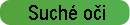
<style>
.page{position:relative;width:130px;height:25px}
.page>*{position:absolute;margin:0}
.t1{font:20.8px "ArialNarrow";color:#000000}
</style>
<div class="page">
<p class="t1" style="left:29px;top:5px;width:76px;height:15px">Suché oči</p>
</div>
